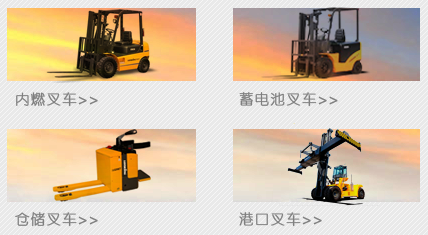
<style>
.page{position:relative;width:428px;height:235px;background:#e9e9e9}
.page>*{position:absolute;margin:0}
.t1{font:14px "FZY1JW--GB1-0";letter-spacing:0.1em;color:#7f7f7f;font-weight:bold}
</style>
<div class="page">
<p class="t1" style="left:16px;top:92px;width:82px;height:15px">内燃叉车&gt;&gt;</p>
<p class="t1" style="left:239px;top:92px;width:99px;height:15px">蓄电池叉车&gt;&gt;</p>
<p class="t1" style="left:15px;top:212px;width:83px;height:15px">仓储叉车&gt;&gt;</p>
<p class="t1" style="left:239px;top:212px;width:83px;height:15px">港口叉车&gt;&gt;</p>
</div>
